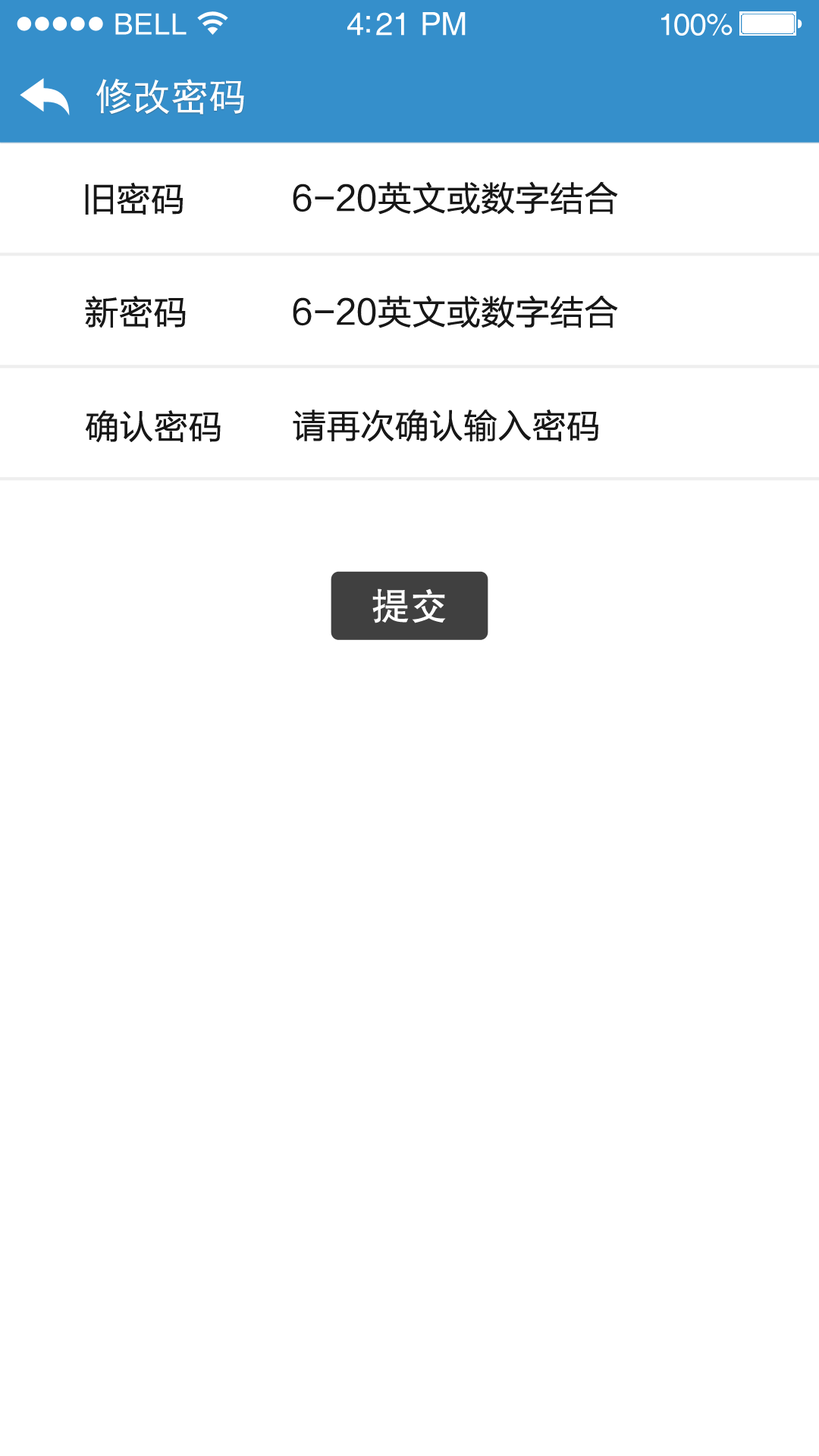
<style>
.page{position:relative;width:819px;height:1456px;background:#ffffff}
.page>*{position:absolute;margin:0}
.t1{font:29.3px "Helvetica";letter-spacing:0.02em;color:#ffffff}
.t2{font:31.8px "Helvetica";letter-spacing:-0.02em;color:#ffffff}
.t3{font:30.6px "Helvetica";letter-spacing:-0.02em;color:#ffffff}
.t4{font:37.9px "SimHei";color:#ffffff}
.t5{font:34.1px "FZLTHJW--GB1-0";letter-spacing:0.01em;color:#171717}
.t6{font:34.1px "FZLTHJW--GB1-0";letter-spacing:0.005em;color:#171717}
.t7{font:37.9px "FZHTK--GBK1-0";letter-spacing:0.01em;color:#ffffff}
</style>
<div class="page">
<p class="t1" style="left:115px;top:13px;width:72px;height:22px">BELL</p>
<p class="t2" style="left:347px;top:12px;width:119px;height:24px">4:21 PM</p>
<p class="t3" style="left:661px;top:14px;width:72px;height:22px">100%</p>
<p class="t4" style="left:96px;top:78px;width:148px;height:37px">修改密码</p>
<p class="t5" style="left:85px;top:182px;width:98px;height:33px">旧密码</p>
<p class="t5" style="left:293px;top:181px;width:325px;height:34px">6-20英文或数字结合</p>
<p class="t5" style="left:85px;top:296px;width:101px;height:32px">新密码</p>
<p class="t5" style="left:293px;top:295px;width:325px;height:33px">6-20英文或数字结合</p>
<p class="t5" style="left:85px;top:410px;width:136px;height:33px">确认密码</p>
<p class="t6" style="left:293px;top:409px;width:305px;height:33px">请再次确认输入密码</p>
<p class="t7" style="left:372px;top:588px;width:74px;height:35px">提交</p>
</div>
